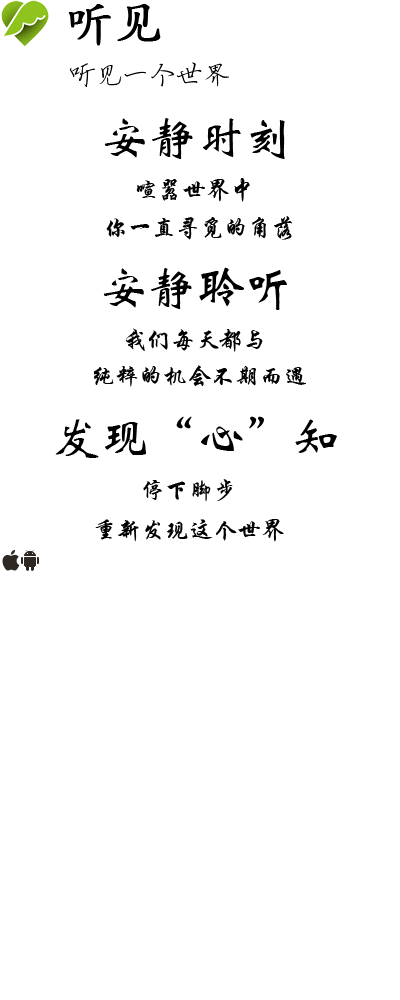
<style>
.page{position:relative;width:400px;height:1000px;background:#ffffff}
.page>*{position:absolute;margin:0}
.t1{font:48px "STKaiti";color:#000000;font-weight:bold}
.t2{font:48px "STXinwei";color:#000000}
.t3{font:24px "STXingkai";color:#000000}
</style>
<div class="page">
<p class="t1" style="left:68px;top:4px;width:93px;height:42px">听见</p>
<p class="t2" style="left:104px;top:118px;width:181px;height:41px">安静时刻</p>
<p class="t3" style="left:136px;top:178px;width:114px;height:24px">喧嚣世界中</p>
<p class="t3" style="left:106px;top:216px;width:186px;height:24px">你一直寻觅的角落</p>
<p class="t2" style="left:103px;top:267px;width:184px;height:43px">安静聆听</p>
<p class="t3" style="left:125px;top:328px;width:138px;height:24px">我们每天都与</p>
<p class="t3" style="left:93px;top:365px;width:213px;height:22px">纯粹的机会不期而遇</p>
<p class="t2" style="left:55px;top:416px;width:282px;height:42px">发现“心”知</p>
<p class="t3" style="left:143px;top:479px;width:90px;height:23px">停下脚步</p>
<p class="t3" style="left:95px;top:519px;width:189px;height:23px">重新发现这个世界</p>
</div>
